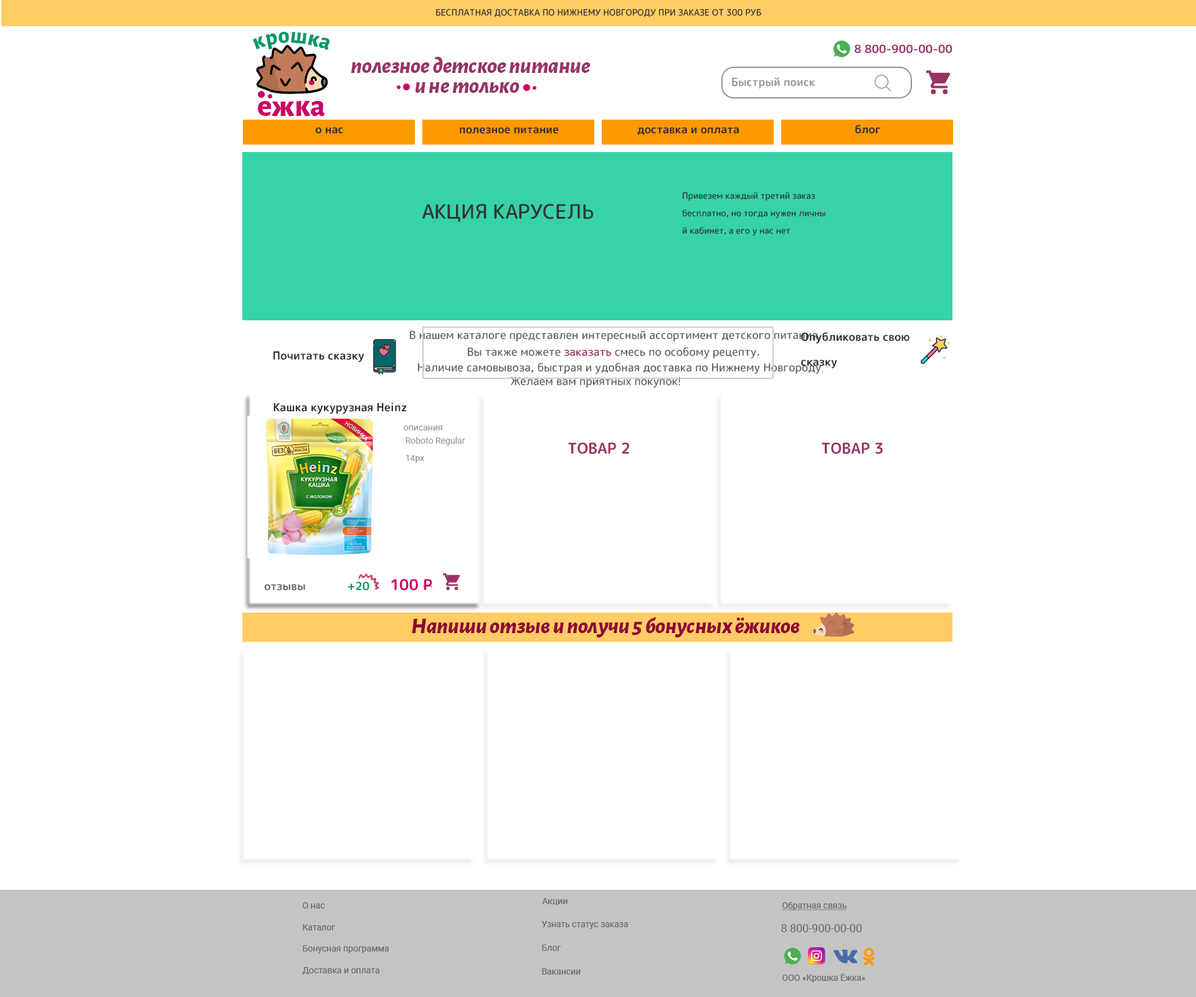
<style>
.page{position:relative;width:1196px;height:997px;background:#ffffff}
.page>*{position:absolute;margin:0}
.t1{font:8.7px "RoundedMplus1c-Medium";color:#333333}
.t2{font:22.9px "AlegreyaSans-ExtraBold";color:#009966}
.t3{font:11.2px "RoundedMplus1c-Bold";color:#993366}
.t4{font:22.4px "AlegreyaSans-ExtraBoldItalic";color:#993366}
.t5{font:11.2px "RoundedMplus1c-Bold";color:#999999}
.t6{font:30.8px "AlegreyaSans-ExtraBold";color:#cc0066}
.t7{font:11.2px "RoundedMplus1c-Bold";color:#302e2e}
.t8{font:8.7px/17.4px "RoundedMplus1c-Medium";color:#333333}
.t9{font:19.9px "RoundedMplus1c-Medium";color:#333333}
.t10{font:11.2px "RoundedMplus1c-Medium";color:#666666}
.t11{font:11.2px/24.9px "RoundedMplus1c-Bold";color:#333333}
.t12{font:11.2px "RoundedMplus1c-Bold";color:#333333}
.t13{font:11.2px "RoundedMplus1c-Medium";color:#993366}
.t14{font:8.7px "Roboto-Regular";color:#666666}
.t15{font:11.2px "Roboto-Regular";color:#666666}
.t16{font:8.7px "Roboto-Regular";color:#999999}
.t17{font:8.7px/17.4px "Roboto-Regular";color:#999999}
.t18{font:15px "RoundedMplus1c-Bold";color:#993366}
.t19{font:11.2px "RoundedMplus1c-Bold";color:#009966}
.t20{font:15px "RoundedMplus1c-Bold";color:#cc0066}
.t21{font:11.2px "RoundedMplus1c-Bold";color:#666666}
.t22{font:22.4px "AlegreyaSans-ExtraBoldItalic";color:#900035}
.t23{font:8.7px "Roboto-Regular";color:#666666;text-decoration:underline}
</style>
<div class="page">
<p class="t1" style="left:436px;top:9px;width:325px;height:8px">БЕСПЛАТНАЯ ДОСТАВКА ПО НИЖНЕМУ НОВГОРОДУ ПРИ ЗАКАЗЕ ОТ 300 РУБ</p>
<p class="t2" style="left:253px;top:32px;width:77px;height:18px">крошка</p>
<p class="t3" style="left:855px;top:44px;width:98px;height:10px">8 800-900-00-00</p>
<p class="t4" style="left:351px;top:57px;width:240px;height:17px">полезное детское питание</p>
<p class="t5" style="left:732px;top:77px;width:83px;height:11px">Быстрый поиск</p>
<p class="t4" style="left:415px;top:82px;width:105px;height:11px">и не только</p>
<p class="t6" style="left:258px;top:101px;width:67px;height:16px">ежка</p>
<p class="t7" style="left:855px;top:125px;width:26px;height:9px">блог</p>
<p class="t7" style="left:315px;top:127px;width:28px;height:7px">о нас</p>
<p class="t7" style="left:460px;top:127px;width:99px;height:7px">полезное питание</p>
<p class="t7" style="left:637px;top:127px;width:102px;height:8px">доставка и оплата</p>
<p class="t8" style="left:682px;top:192px;width:144px;height:44px">Привезем каждый третий заказ<br>бесплатно, но тогда нужен личный кабинет, а его у нас нет</p>
<p class="t9" style="left:422px;top:204px;width:172px;height:18px">АКЦИЯ КАРУСЕЛЬ</p>
<p class="t10" style="left:409px;top:330px;width:412px;height:11px">В нашем каталоге представлен интересный ассортимент детского питания.</p>
<p class="t11" style="left:801px;top:332px;width:109px;height:36px">Опубликовать свою<br>сказку</p>
<p class="t12" style="left:274px;top:351px;width:90px;height:11px">Почитать сказку</p>
<p class="t10" style="left:467px;top:347px;width:292px;height:12px">Вы также можете <span class="t13">заказать</span> смесь по особому рецепту.</p>
<p class="t10" style="left:417px;top:363px;width:407px;height:11px">Наличие самовывоза, быстрая и удобная доставка по Нижнему Новгороду<span class="t14">.</span></p>
<p class="t10" style="left:511px;top:376px;width:169px;height:12px">Желаем вам приятных покупок<span class="t15">!</span></p>
<p class="t12" style="left:274px;top:402px;width:133px;height:12px">Кашка кукурузная Heinz</p>
<p class="t16" style="left:404px;top:426px;width:38px;height:5px">описания</p>
<p class="t17" style="left:406px;top:437px;width:59px;height:26px">Roboto Regular<br>14px</p>
<p class="t18" style="left:568px;top:442px;width:61px;height:12px">ТОВАР 2</p>
<p class="t18" style="left:822px;top:442px;width:61px;height:12px">ТОВАР 3</p>
<p class="t19" style="left:348px;top:581px;width:21px;height:10px">+20</p>
<p class="t20" style="left:391px;top:579px;width:41px;height:12px">100 Р</p>
<p class="t21" style="left:264px;top:584px;width:41px;height:7px">отзывы</p>
<p class="t22" style="left:412px;top:617px;width:388px;height:20px">Напиши отзыв и получи 5 бонусных ёжиков</p>
<p class="t14" style="left:303px;top:902px;width:22px;height:6px">О нас</p>
<p class="t14" style="left:542px;top:898px;width:26px;height:7px">Акции</p>
<p class="t23" style="left:782px;top:902px;width:65px;height:8px">Обратная связь</p>
<p class="t14" style="left:303px;top:924px;width:33px;height:6px">Каталог</p>
<p class="t14" style="left:541px;top:921px;width:87px;height:8px">Узнать статус заказа</p>
<p class="t15" style="left:781px;top:924px;width:81px;height:8px">8 800-900-00-00</p>
<p class="t14" style="left:303px;top:945px;width:86px;height:8px">Бонусная программа</p>
<p class="t14" style="left:542px;top:945px;width:19px;height:6px">Блог</p>
<p class="t14" style="left:302px;top:967px;width:77px;height:7px">Доставка и оплата</p>
<p class="t14" style="left:542px;top:968px;width:39px;height:6px">Вакансии</p>
<p class="t14" style="left:783px;top:973px;width:82px;height:10px">ООО «Крошка Ёжка»</p>
</div>
